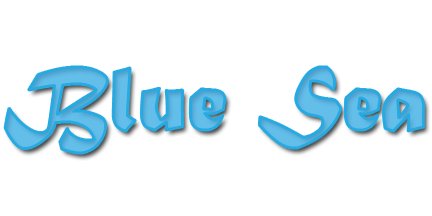
<style>
.page{position:relative;width:432px;height:216px;background:#ffffff}
.page>*{position:absolute;margin:0}
.t1{font:95px "MaturaMTScriptCapitals";color:#63bee9}
</style>
<div class="page">
<p class="t1" style="left:5px;top:67px;width:419px;height:86px">Blue Sea</p>
</div>
